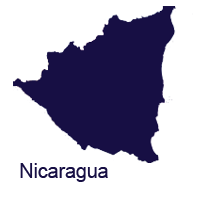
<style>
.page{position:relative;width:200px;height:200px;background:#ffffff}
.page>*{position:absolute;margin:0}
.t1{font:20.8px "ArialMT";color:#170f44;scale:0.94 1}
</style>
<div class="page">
<p class="t1" style="left:20px;top:163px;width:88px;height:19px">Nicaragua</p>
</div>
